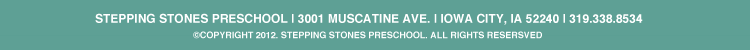
<style>
.page{position:relative;width:750px;height:50px;background:#5ea095}
.page>*{position:absolute;margin:0}
.t1{font:12px "Helvetica-Bold";color:#ffffff}
.t2{font:9px "Helvetica-Bold";color:#ffffff}
</style>
<div class="page">
<p class="t1" style="left:95px;top:13px;width:548px;height:12px">STEPPING STONES PRESCHOOL | 3001 MUSCATINE AVE. | IOWA CITY, IA 52240 | 319.338.8534</p>
<p class="t2" style="left:193px;top:31px;width:349px;height:8px">©COPYRIGHT 2012. STEPPING STONES PRESCHOOL. ALL RIGHTS RESERSVED</p>
</div>
